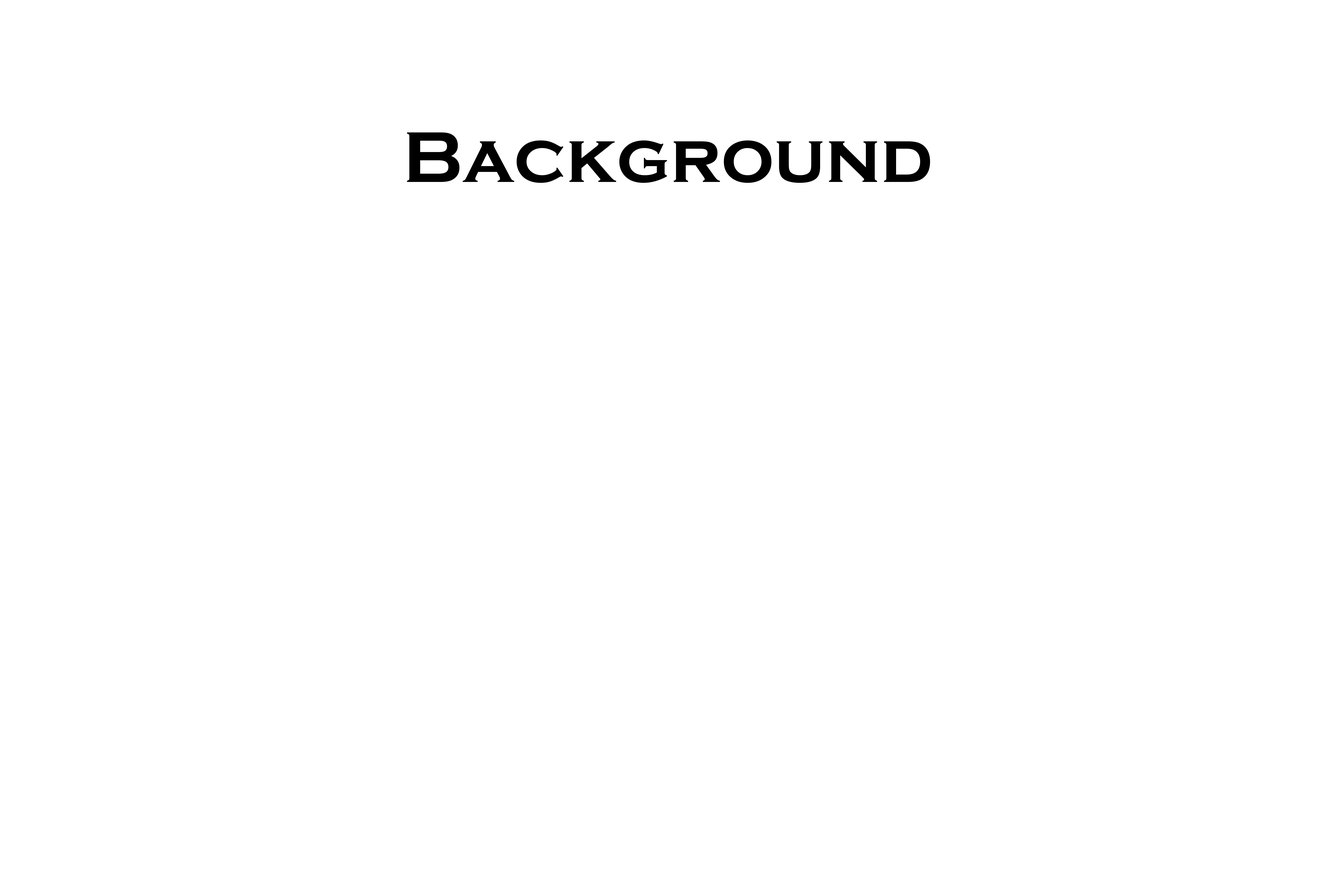
<style>
.page{position:relative;width:1337px;height:892px;background:#ffffff}
.page>*{position:absolute;margin:0}
.t1{font:74.3px "CopperplateGothic-Bold";color:#000000}
</style>
<div class="page">
<p class="t1" style="left:407px;top:132px;width:523px;height:51px">Background</p>
</div>
